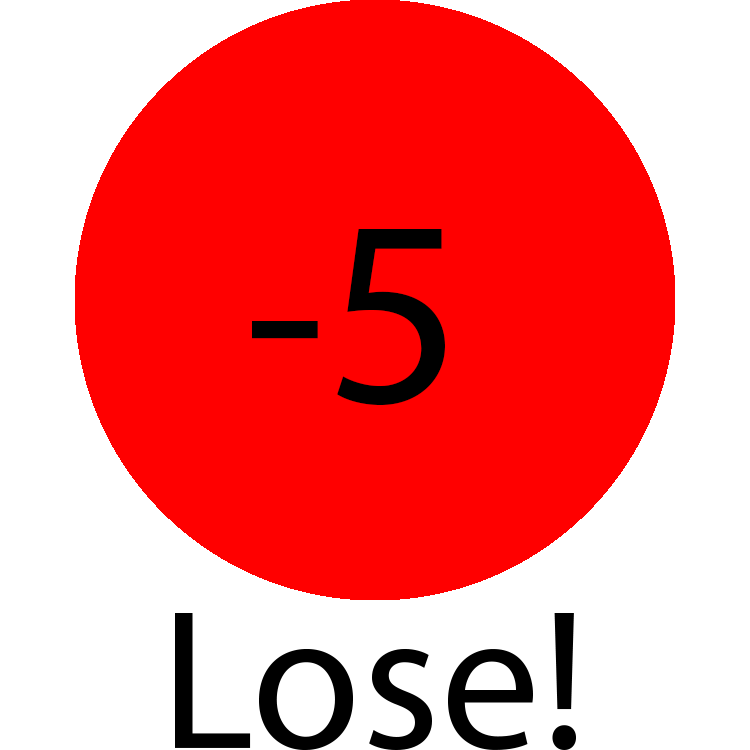
<style>
.page{position:relative;width:750px;height:750px;background:#ff0000}
.page>*{position:absolute;margin:0}
.t1{font:266.7px "MyriadPro-Regular";color:#000000}
.t2{font:200px "MyriadPro-Regular";color:#000000}
</style>
<div class="page">
<p class="t1" style="left:252px;top:229px;width:193px;height:177px">-53fb55b1</p>
<p class="t2" style="left:175px;top:613px;width:401px;height:137px">Lose!</p>
</div>
